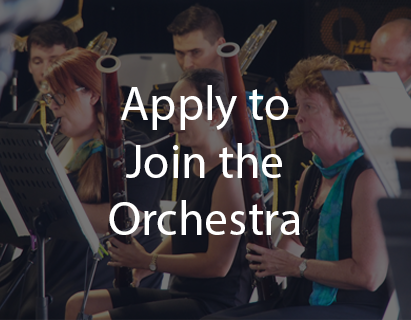
<style>
.page{position:relative;width:411px;height:320px}
.page>*{position:absolute;margin:0}
.t1{font:48px "MyriadPro-Regular";color:#ffffff}
</style>
<div class="page">
<p class="t1" style="left:109px;top:85px;width:191px;height:150px;text-align:center">Apply to<br>Join the<br>Orchestra</p>
</div>
